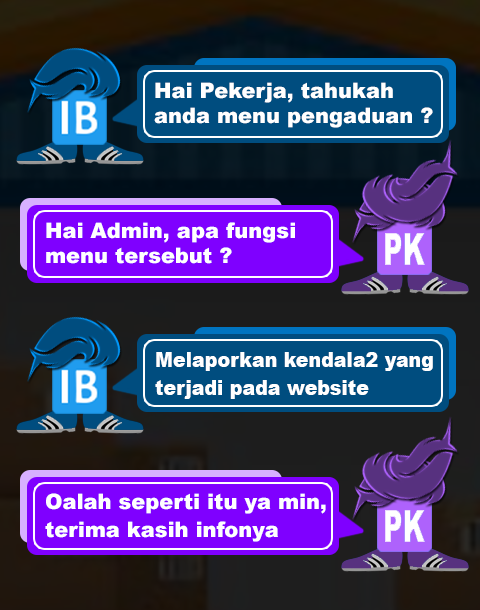
<style>
.page{position:relative;width:480px;height:610px}
.page>*{position:absolute;margin:0}
.t1{font:21.2px/585.7px "Arial-Black";color:#ffffff}
.t2{font:21.2px/585.3px "Arial-Black";color:#ffffff;scale:0.9 1}
</style>
<div class="page">
<p class="t1" style="left:154px;top:82px;width:279px;height:46px">Hai Pekerja, tahukah<br>anda menu pengaduan ?</p>
<p class="t1" style="left:46px;top:222px;width:249px;height:42px">Hai Admin, apa fungsi<br>menu tersebut ?</p>
<p class="t2" style="left:155px;top:352px;width:278px;height:47px">Melaporkan kendala2 yang<br>terjadi pada website</p>
<p class="t1" style="left:45px;top:493px;width:281px;height:49px">Oalah seperti itu ya min,<br>terima kasih infonya</p>
</div>
